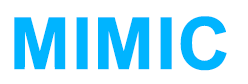
<style>
.page{position:relative;width:248px;height:84px;background:#ffffff}
.page>*{position:absolute;margin:0}
.t1{font:72px "Arial-BoldMT";color:#00b4ff;font-weight:bold}
</style>
<div class="page">
<p class="t1" style="left:14px;top:16px;width:213px;height:55px">MIMIC</p>
</div>
